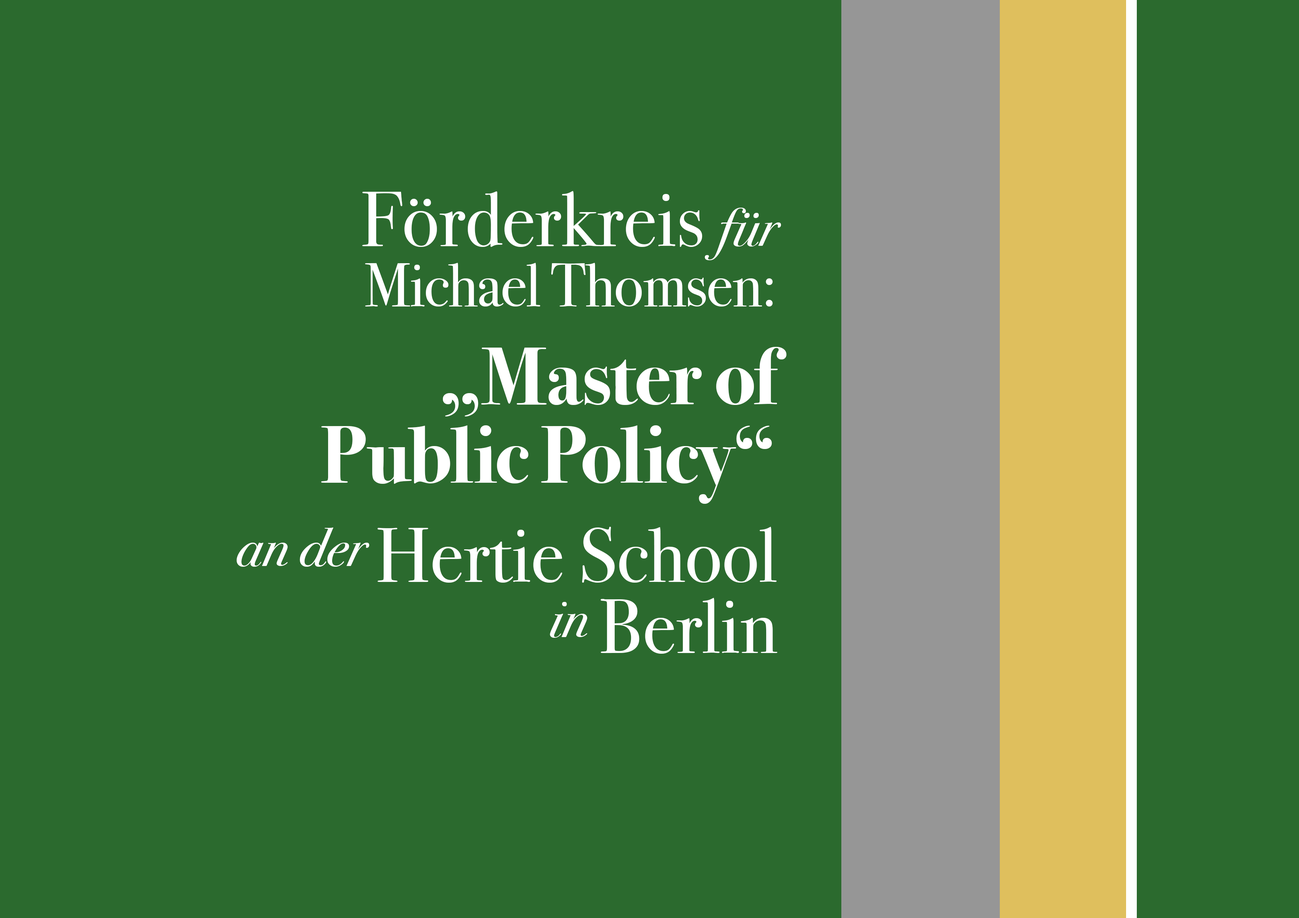
<style>
.page{position:relative;width:1299px;height:918px;background:#2b6a2e}
.page>*{position:absolute;margin:0}
.t1{font:61.7px/60.2px "BodoniSvtyTwoITCTT-Book";letter-spacing:-0.015em;color:#ffffff}
.t2{font:77.1px "BodoniSvtyTwoITCTT-Book";color:#ffffff}
.t3{font:54px "BodoniSvtyTwoITCTT-BookIta";color:#ffffff}
.t4{font:81.8px "BodoniSvtyTwoITCTT-Bold";color:#ffffff}
.t5{font:81.8px/78.7px "BodoniSvtyTwoITCTT-Bold";color:#ffffff}
.t6{font:54px/98.7px "BodoniSvtyTwoITCTT-BookIta";color:#ffffff}
.t7{font:77.1px/98.7px "BodoniSvtyTwoITCTT-Book";color:#ffffff}
.t8{font:54px/71px "BodoniSvtyTwoITCTT-BookIta";color:#ffffff}
.t9{font:77.1px/71px "BodoniSvtyTwoITCTT-Book";color:#ffffff}
</style>
<div class="page">
<p class="t1" style="left:237px;top:191px;width:549px;height:463px;text-align:right"><span class="t2">Förderkreis </span><span class="t3">für <br></span>Michael Thomsen:<br><span class="t4">„Master of<br></span><span class="t5">Public Policy“<br> </span><span class="t6">an der </span><span class="t7">Hertie School<br></span><span class="t8">in </span><span class="t9">Berlin</span></p>
</div>
